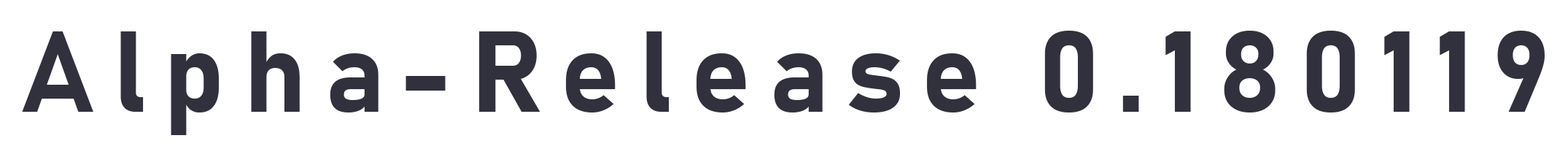
<style>
.page{position:relative;width:1568px;height:149px;background:#ffffff}
.page>*{position:absolute;margin:0}
.t1{font:113.3px "Bahnschrift-Bold";letter-spacing:0.16em;color:#31313d}
</style>
<div class="page">
<p class="t1" style="left:22px;top:31px;width:1523px;height:104px">Alpha-Release 0.180119</p>
</div>
